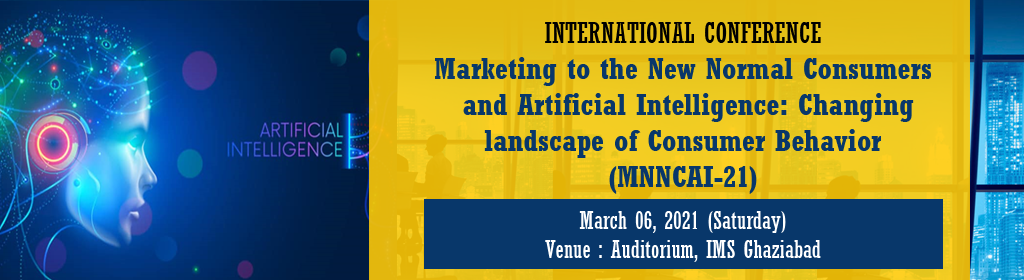
<style>
.page{position:relative;width:1024px;height:280px}
.page>*{position:absolute;margin:0}
.t1{font:30px "Rockwell-CondensedBold";color:#08376a}
.t2{font:28px "Rockwell-Condensed";color:#000000}
.t3{font:24px "Rockwell-Condensed";color:#ffffff}
</style>
<div class="page">
<p class="t1" style="left:435px;top:22px;width:496px;height:172px;text-align:center"><span class="t2">INTERNATIONAL CONFERENCE<br></span>Marketing to the New Normal Consumers<br> and Artificial Intelligence: Changing<br> landscape of Consumer Behavior <br>(MNNCAI-21)</p>
<p class="t3" style="left:545px;top:211px;width:276px;height:51px;text-align:center">March 06, 2021 (Saturday)<br>Venue : Auditorium, IMS Ghaziabad</p>
</div>
